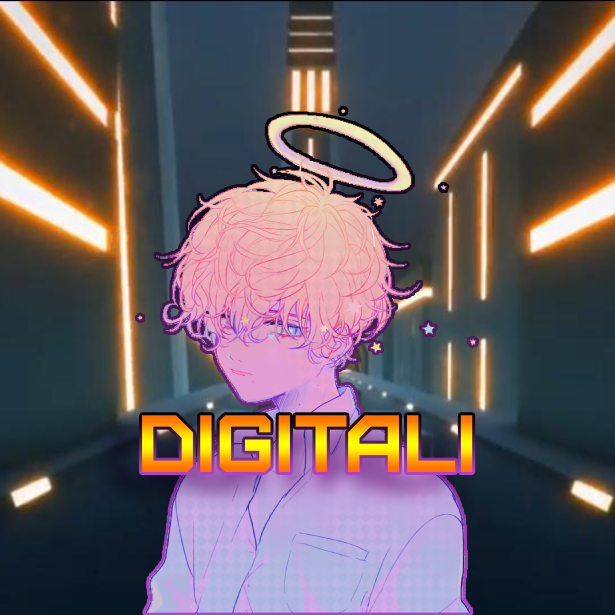
<style>
.page{position:relative;width:615px;height:615px}
.page>*{position:absolute;margin:0}
.t1{font:81px "Furore"}
</style>
<div class="page">
<p class="t1" style="left:142px;top:415px;width:331px;height:57px">Digitali</p>
</div>
